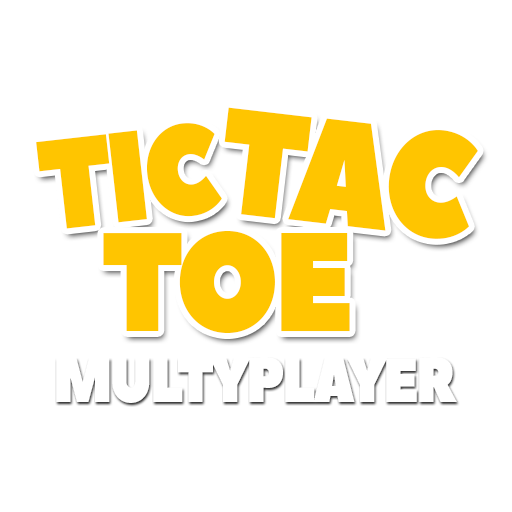
<style>
.page{position:relative;width:512px;height:512px;background:#ffffff}
.page>*{position:absolute;margin:0}
.t1{font:149px "PeaceSans";letter-spacing:-0.05em;color:#ffc500;scale:0.87 1}
.t2{font:127.4px "PeaceSans";letter-spacing:-0.05em;color:#ffb600;scale:0.86 1}
.t3{font:139.5px "PeaceSans";letter-spacing:-0.05em;color:#ffb600;scale:0.87 1}
.t4{font:62.2px "PeaceSans";letter-spacing:-0.05em;color:#ffffff;scale:0.88 1}
</style>
<div class="page">
<p class="t1" style="left:224px;top:107px;width:254px;height:132px;rotate:7deg">TAC</p>
<p class="t2" style="left:36px;top:123px;width:186px;height:106px;rotate:-6deg">TIC</p>
<p class="t3" style="left:103px;top:230px;width:247px;height:103px">TOE</p>
<p class="t4" style="left:56px;top:357px;width:401px;height:46px">MULTYPLAYER</p>
</div>
